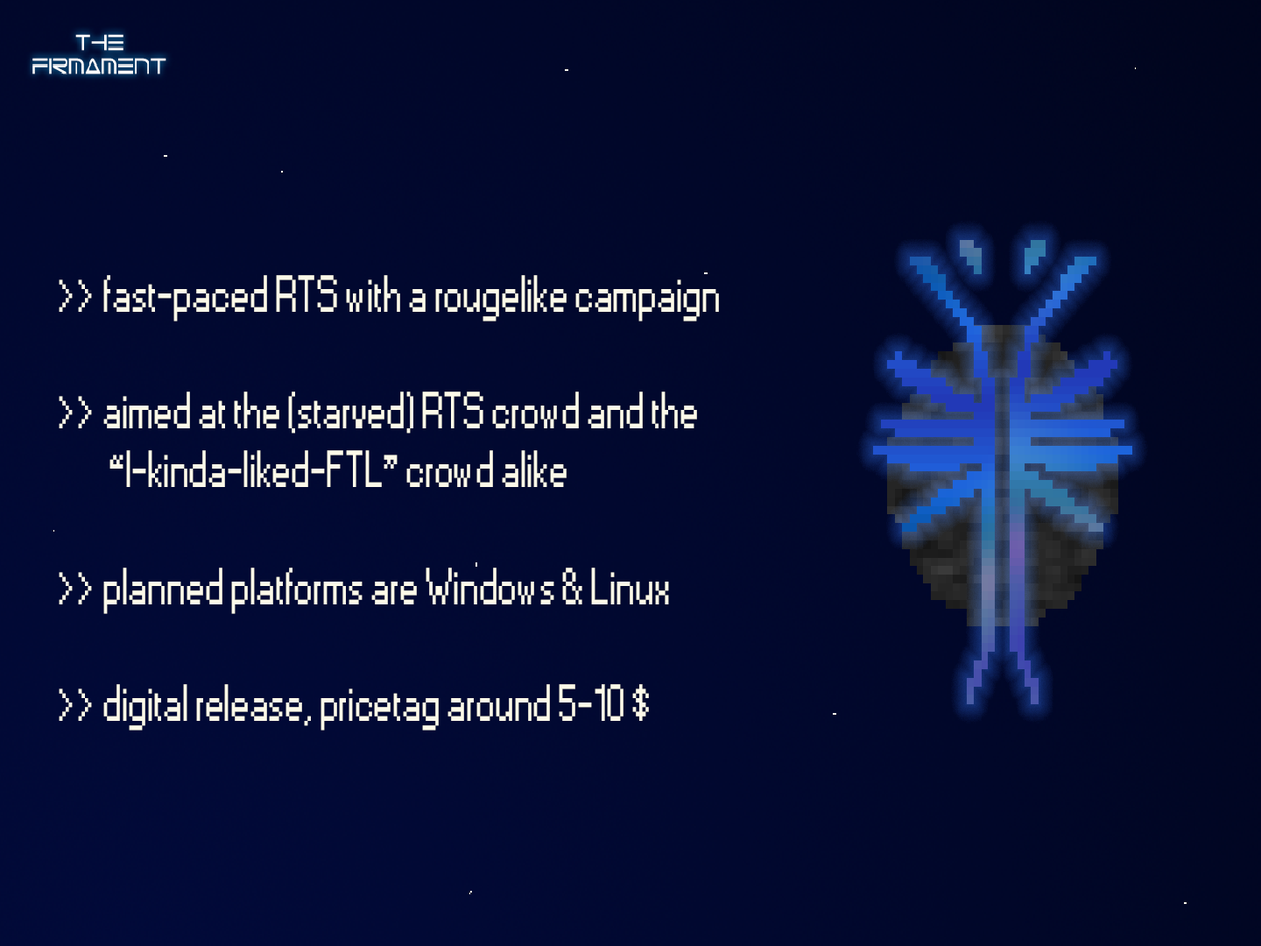
<style>
.page{position:relative;width:1261px;height:946px}
.page>*{position:absolute;margin:0}
.t1{font:48.7px "Small Fonts";color:#fcf9e9;scale:0.84 1}
</style>
<div class="page">
<p class="t1" style="left:59px;top:275px;width:660px;height:455px">&gt;&gt; fast-paced RTS with a rougelike campaign<br><br>&gt;&gt; aimed at the (starved) RTS crowd and the<br>        “I-kinda-liked-FTL” crowd alike<br><br>&gt;&gt; planned platforms are Windows &amp; Linux<br><br>&gt;&gt; digital release, pricetag around 5-10 $</p>
</div>
